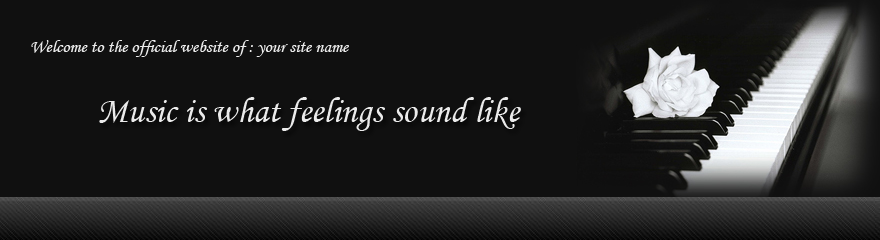
<style>
.page{position:relative;width:880px;height:240px;background:#101010}
.page>*{position:absolute;margin:0}
.t1{font:18px "MonotypeCorsiva";color:#ebebeb}
.t2{font:36px "MonotypeCorsiva";color:#ebebeb}
</style>
<div class="page">
<p class="t1" style="left:31px;top:40px;width:318px;height:17px">Welcome to the official website of : your site name</p>
<p class="t2" style="left:99px;top:97px;width:422px;height:34px">Music is what feelings sound like</p>
</div>
